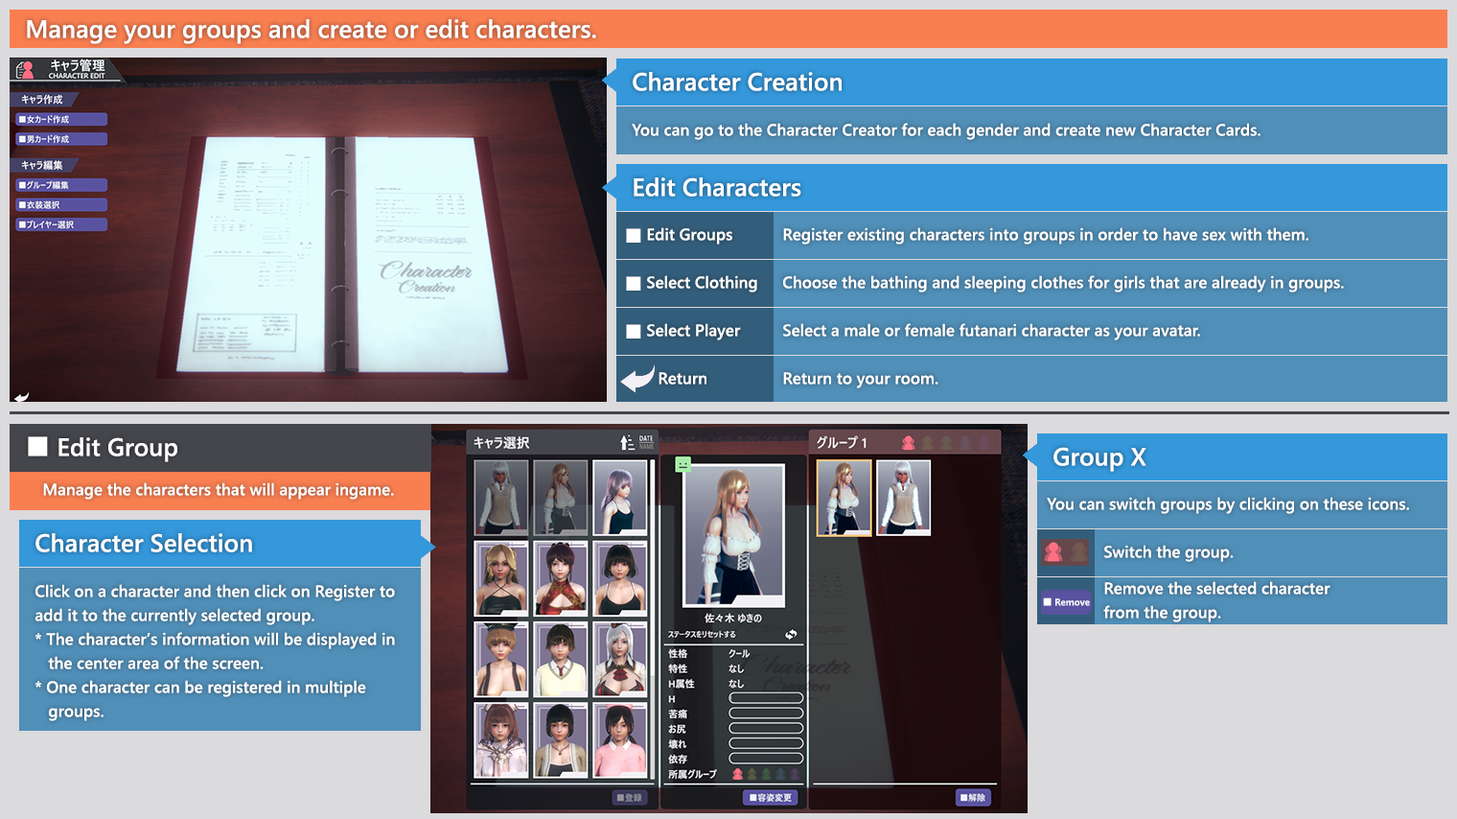
<style>
.page{position:relative;width:1457px;height:819px}
.page>*{position:absolute;margin:0}
.t1{font:24.9px "YuGothicUI-Semibold";color:#ffffff}
.t2{font:16.3px "YuGothicUI-Semibold";color:#ffffff}
.t3{font:16.3px/24px "YuGothicUI-Semibold";color:#ffffff}
.t4{font:9.6px "YuGothicUI-Semibold";color:#ffffff}
</style>
<div class="page">
<p class="t1" style="left:27px;top:19px;width:569px;height:25px">Manage your groups and create or edit characters.</p>
<p class="t1" style="left:633px;top:72px;width:209px;height:19px">Character Creation</p>
<p class="t2" style="left:632px;top:123px;width:628px;height:17px">You can go to the Character Creator for each gender and create new Character Cards.</p>
<p class="t1" style="left:634px;top:177px;width:167px;height:19px">Edit Characters</p>
<p class="t2" style="left:647px;top:227px;width:85px;height:17px">Edit Groups</p>
<p class="t2" style="left:783px;top:227px;width:525px;height:17px">Register existing characters into groups in order to have sex with them.</p>
<p class="t2" style="left:647px;top:275px;width:110px;height:17px">Select Clothing</p>
<p class="t2" style="left:783px;top:275px;width:561px;height:17px">Choose the bathing and sleeping clothes for girls that are already in groups.</p>
<p class="t2" style="left:647px;top:323px;width:94px;height:17px">Select Player</p>
<p class="t2" style="left:783px;top:323px;width:417px;height:17px">Select a male or female futanari character as your avatar.</p>
<p class="t2" style="left:658px;top:372px;width:48px;height:12px">Return</p>
<p class="t2" style="left:783px;top:372px;width:155px;height:16px">Return to your room.</p>
<p class="t1" style="left:28px;top:436px;width:149px;height:26px">■ Edit Group</p>
<p class="t1" style="left:1053px;top:447px;width:93px;height:25px">Group X</p>
<p class="t2" style="left:43px;top:482px;width:351px;height:17px">Manage the characters that will appear ingame.</p>
<p class="t2" style="left:1047px;top:496px;width:362px;height:18px">You can switch groups by clicking on these icons.</p>
<p class="t1" style="left:35px;top:533px;width:217px;height:19px">Character Selection</p>
<p class="t2" style="left:1104px;top:544px;width:130px;height:18px">Switch the group.</p>
<p class="t3" style="left:1103px;top:581px;width:227px;height:41px">Remove the selected character<br>from the group.</p>
<p class="t3" style="left:35px;top:584px;width:360px;height:137px">Click on a character and then click on Register to<br>add it to the currently selected group.<br>* The character’s information will be displayed in<br>   the center area of the screen.<br>* One character can be registered in multiple<br>   groups.</p>
<p class="t4" style="left:1043px;top:597px;width:47px;height:9px">■ Remove</p>
</div>
